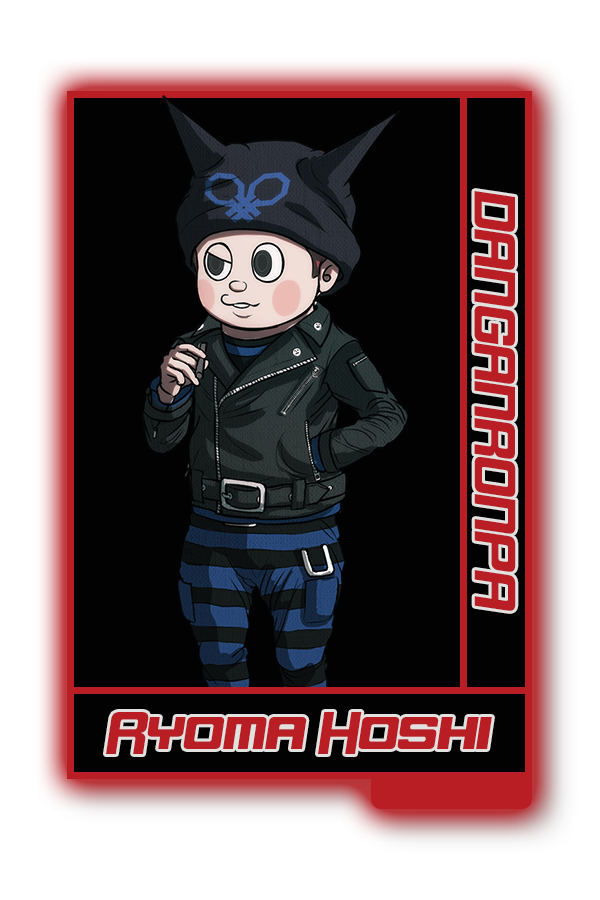
<style>
.page{position:relative;width:600px;height:900px;background:#020202}
.page>*{position:absolute;margin:0}
.t1{font:48.8px "DorBlue";color:#bb2c2e}
.t2{font:50.5px "DorBlue";color:#bb2c2e}
</style>
<div class="page">
<p class="t1" style="left:474px;top:191px;width:42px;height:420px;rotate:90deg">DANGANRONPA</p>
<p class="t2" style="left:106px;top:712px;width:386px;height:42px">Ryoma Hoshi</p>
</div>
